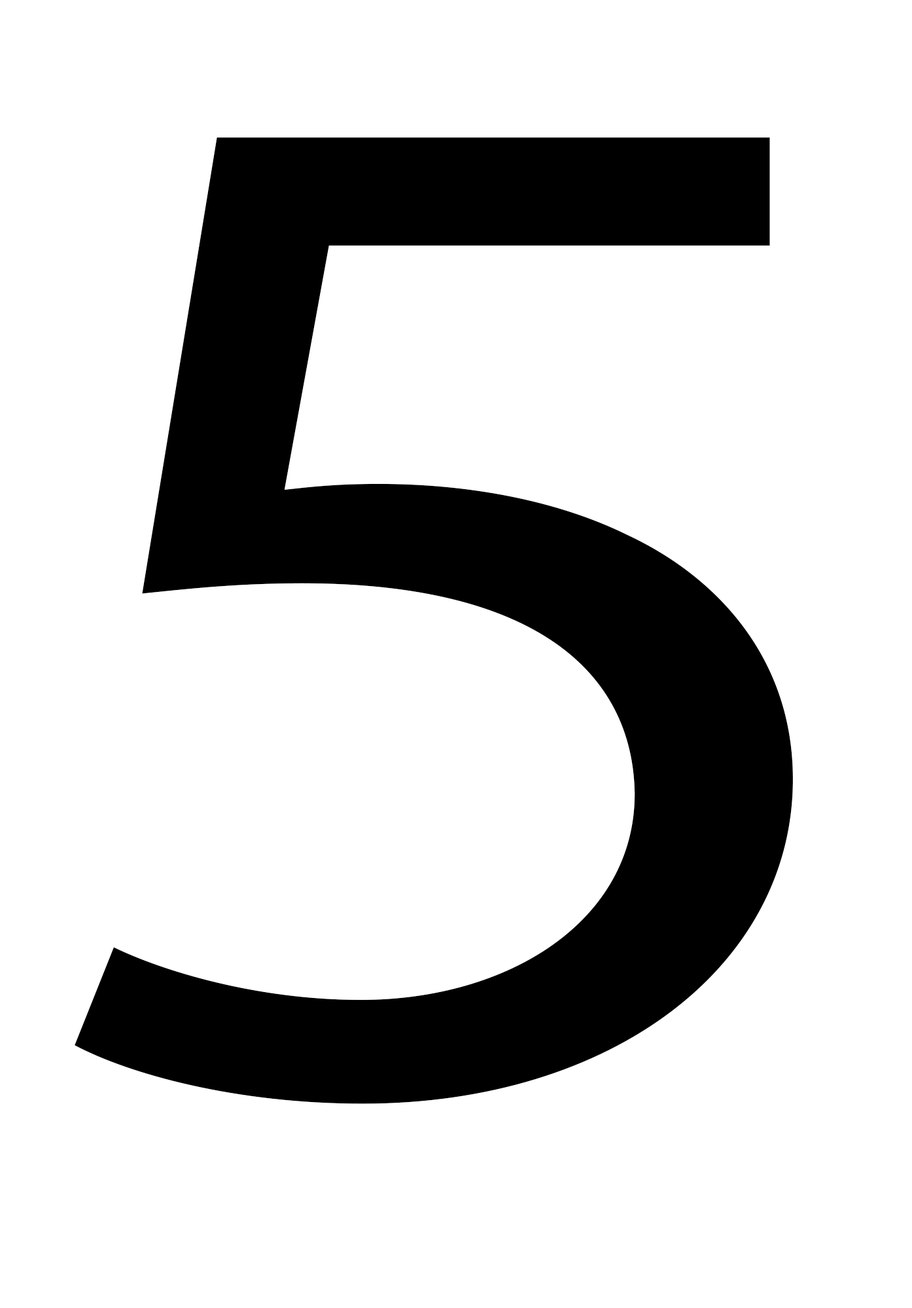
<style>
.page{position:relative;width:912px;height:1308px;background:#ffffff}
.page>*{position:absolute;margin:0}
.t1{font:1461.7px "MyriadPro-Regular";color:#000000;scale:1.22 1}
</style>
<div class="page">
<p class="t1" style="left:75px;top:137px;width:718px;height:967px">5</p>
</div>
